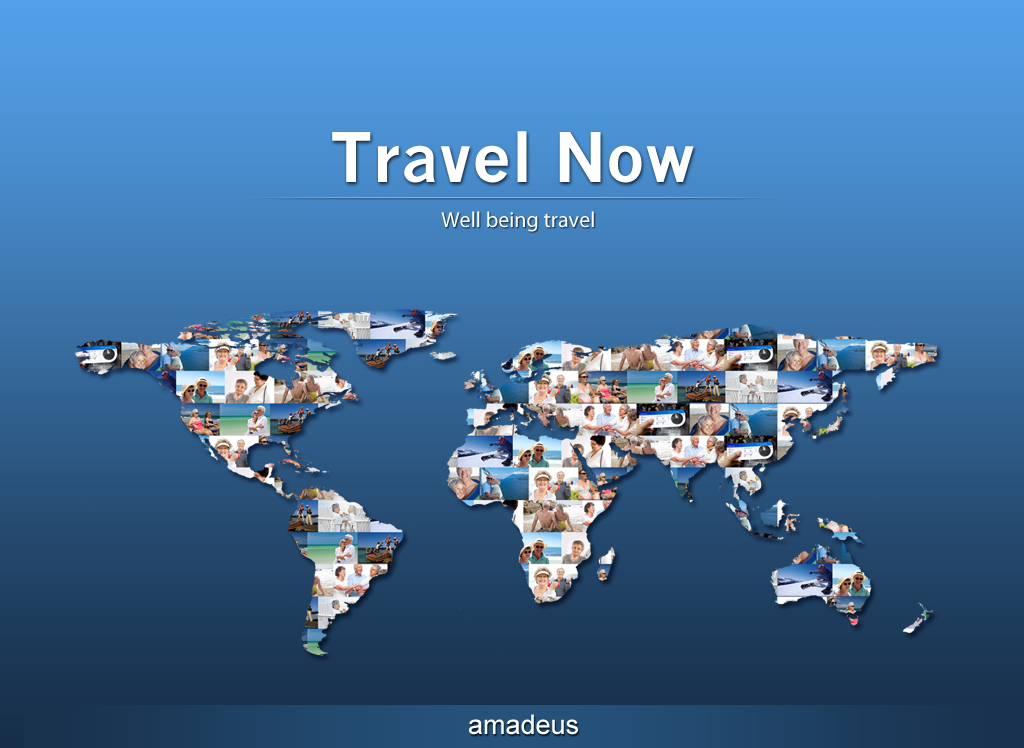
<style>
.page{position:relative;width:1024px;height:748px}
.page>*{position:absolute;margin:0}
.t1{font:67px "NewsGothicMT-Bold";color:#ffffff}
.t2{font:22px "MyriadPro-Regular";color:#ffffff}
.t3{font:27px "ArialMT";color:#ffffff}
</style>
<div class="page">
<p class="t1" style="left:332px;top:131px;width:362px;height:52px">Travel Now</p>
<p class="t2" style="left:441px;top:211px;width:153px;height:21px">Well being travel</p>
<p class="t3" style="left:469px;top:714px;width:109px;height:21px">amadeus</p>
</div>
